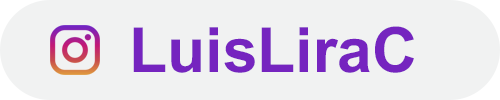
<style>
.page{position:relative;width:500px;height:100px;background:#f1f2f2}
.page>*{position:absolute;margin:0}
.t1{font:62.5px "Arial-BoldMT";color:#7524bf}
</style>
<div class="page">
<p class="t1" style="left:133px;top:26px;width:281px;height:47px">LuisLiraC</p>
</div>
